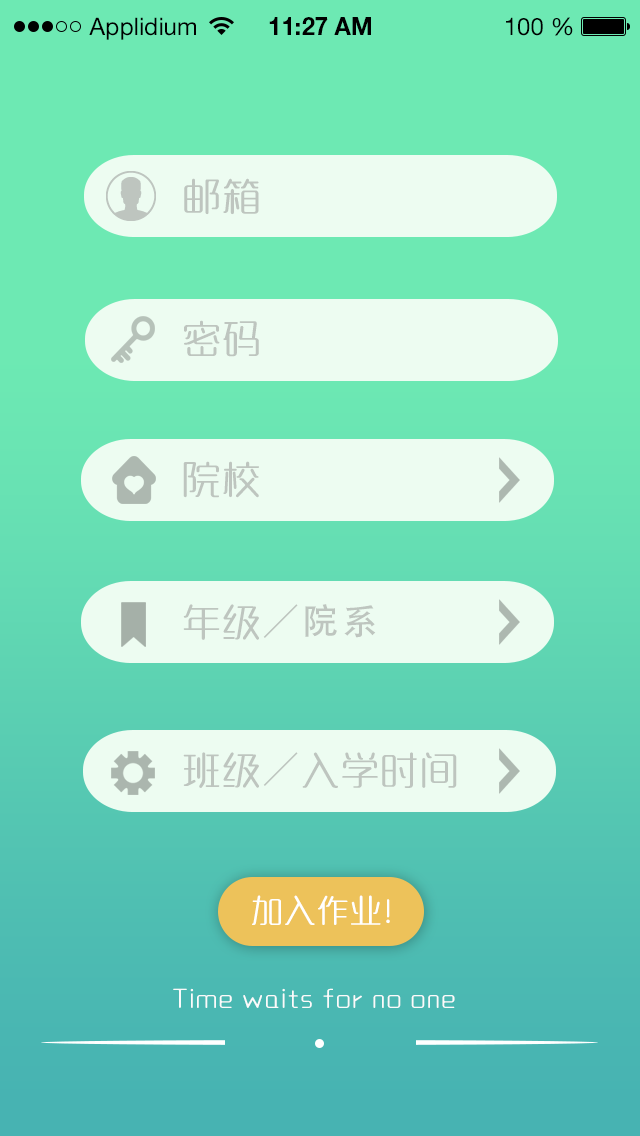
<style>
.page{position:relative;width:640px;height:1136px;background:#6de9b3}
.page>*{position:absolute;margin:0}
.t1{font:24px "HelveticaNeueLTStd-Roman";color:#000000}
.t2{font:24px "HelveticaNeueLTStd-Bd";color:#000000}
.t3{font:36px "MFYaYuan_Noncommercial-Regular";letter-spacing:0.1em;color:#bec5bf}
.t4{font:36px "AdobeHeitiStd-Regular";letter-spacing:0.1em;color:#bec5bf}
.t5{font:30px "MFYaYuan_Noncommercial-Regular";letter-spacing:0.1em;color:#ffffff}
.t6{font:24px "MFYaYuan_Noncommercial-Regular";letter-spacing:0.1em;color:#fbfbfb}
</style>
<div class="page">
<p class="t1" style="left:89px;top:17px;width:107px;height:23px">Applidium</p>
<p class="t2" style="left:269px;top:17px;width:102px;height:18px">11:27 AM</p>
<p class="t1" style="left:506px;top:17px;width:67px;height:19px">100 %</p>
<p class="t3" style="left:184px;top:178px;width:75px;height:37px">邮箱</p>
<p class="t3" style="left:184px;top:320px;width:75px;height:37px">密码</p>
<p class="t3" style="left:183px;top:461px;width:76px;height:37px">院校</p>
<p class="t4" style="left:183px;top:604px;width:193px;height:36px"><span class="t3">年级</span>／院系</p>
<p class="t3" style="left:183px;top:752px;width:274px;height:36px">班级<span class="t4">／</span>入学时间</p>
<p class="t5" style="left:252px;top:895px;width:138px;height:30px">加入作业！</p>
<p class="t6" style="left:173px;top:988px;width:282px;height:20px">Time waits for no one</p>
</div>
